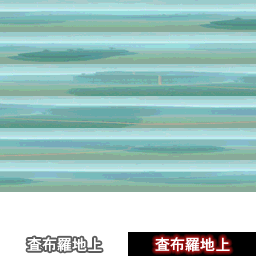
<style>
.page{position:relative;width:256px;height:256px}
.page>*{position:absolute;margin:0}
.t1{font:15px "HeiseiKakuGoStd-W5";letter-spacing:0.04em;color:#ffffff}
</style>
<div class="page">
<p class="t1" style="left:27px;top:237px;width:75px;height:15px">査布羅地上</p>
<p class="t1" style="left:155px;top:237px;width:75px;height:15px">査布羅地上</p>
</div>
